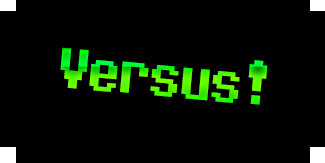
<style>
.page{position:relative;width:325px;height:163px;background:#000000}
.page>*{position:absolute;margin:0}
.t1{font:70px "8bitoperator-JVE"}
</style>
<div class="page">
<p class="t1" style="left:60px;top:47px;width:208px;height:58px;rotate:5deg">Versus!</p>
</div>
